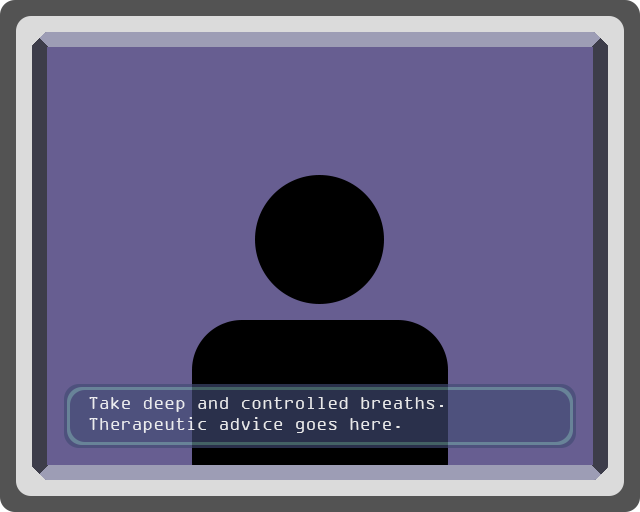
<style>
.page{position:relative;width:640px;height:512px;background:#675e91}
.page>*{position:absolute;margin:0}
.t1{font:18px "OCRAExtended";color:#ffffff}
</style>
<div class="page">
<p class="t1" style="left:89px;top:397px;width:354px;height:36px;opacity:0.85">Take deep and controlled breaths. Therapeutic advice goes here.</p>
</div>
